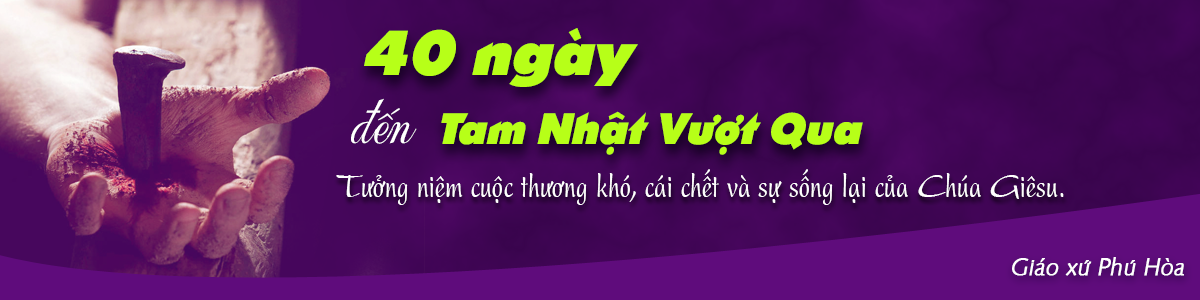
<style>
.page{position:relative;width:1200px;height:300px}
.page>*{position:absolute;margin:0}
.t1{font:63.3px "UTM-Sharnay";color:#b7ff18}
.t2{font:67.7px "UTM-Wedding-K&T";color:#ffffff}
.t3{font:44px "UTM-Sharnay";color:#b7ff18}
.t4{font:36px "UVNBayBuomHep";color:#ffffff}
.t5{font:23px "SFUSaxonyLight";color:#ffffff;font-weight:bold;font-style:italic}
</style>
<div class="page">
<p class="t1" style="left:364px;top:28px;width:274px;height:59px">40 ngày</p>
<p class="t2" style="left:351px;top:98px;width:66px;height:46px">đến</p>
<p class="t3" style="left:441px;top:111px;width:422px;height:44px">Tam Nhật Vượt Qua</p>
<p class="t4" style="left:336px;top:169px;width:728px;height:36px">Tưởng niệm cuộc thương khó, cái chết và sự sống lại của Chúa Giêsu.</p>
<p class="t5" style="left:1012px;top:257px;width:172px;height:19px">Giáo xứ Phú Hòa</p>
</div>
